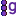
<style>
.page{position:relative;width:16px;height:16px;background:#ffffff}
.page>*{position:absolute;margin:0}
.t1{font:16px "Roboto-Regular";color:#5c2598}
</style>
<div class="page">
<p class="t1" style="left:8px;top:2px;width:8px;height:12px">g</p>
<p class="t1" style="left:8px;top:2px;width:8px;height:13px">g</p>
</div>
